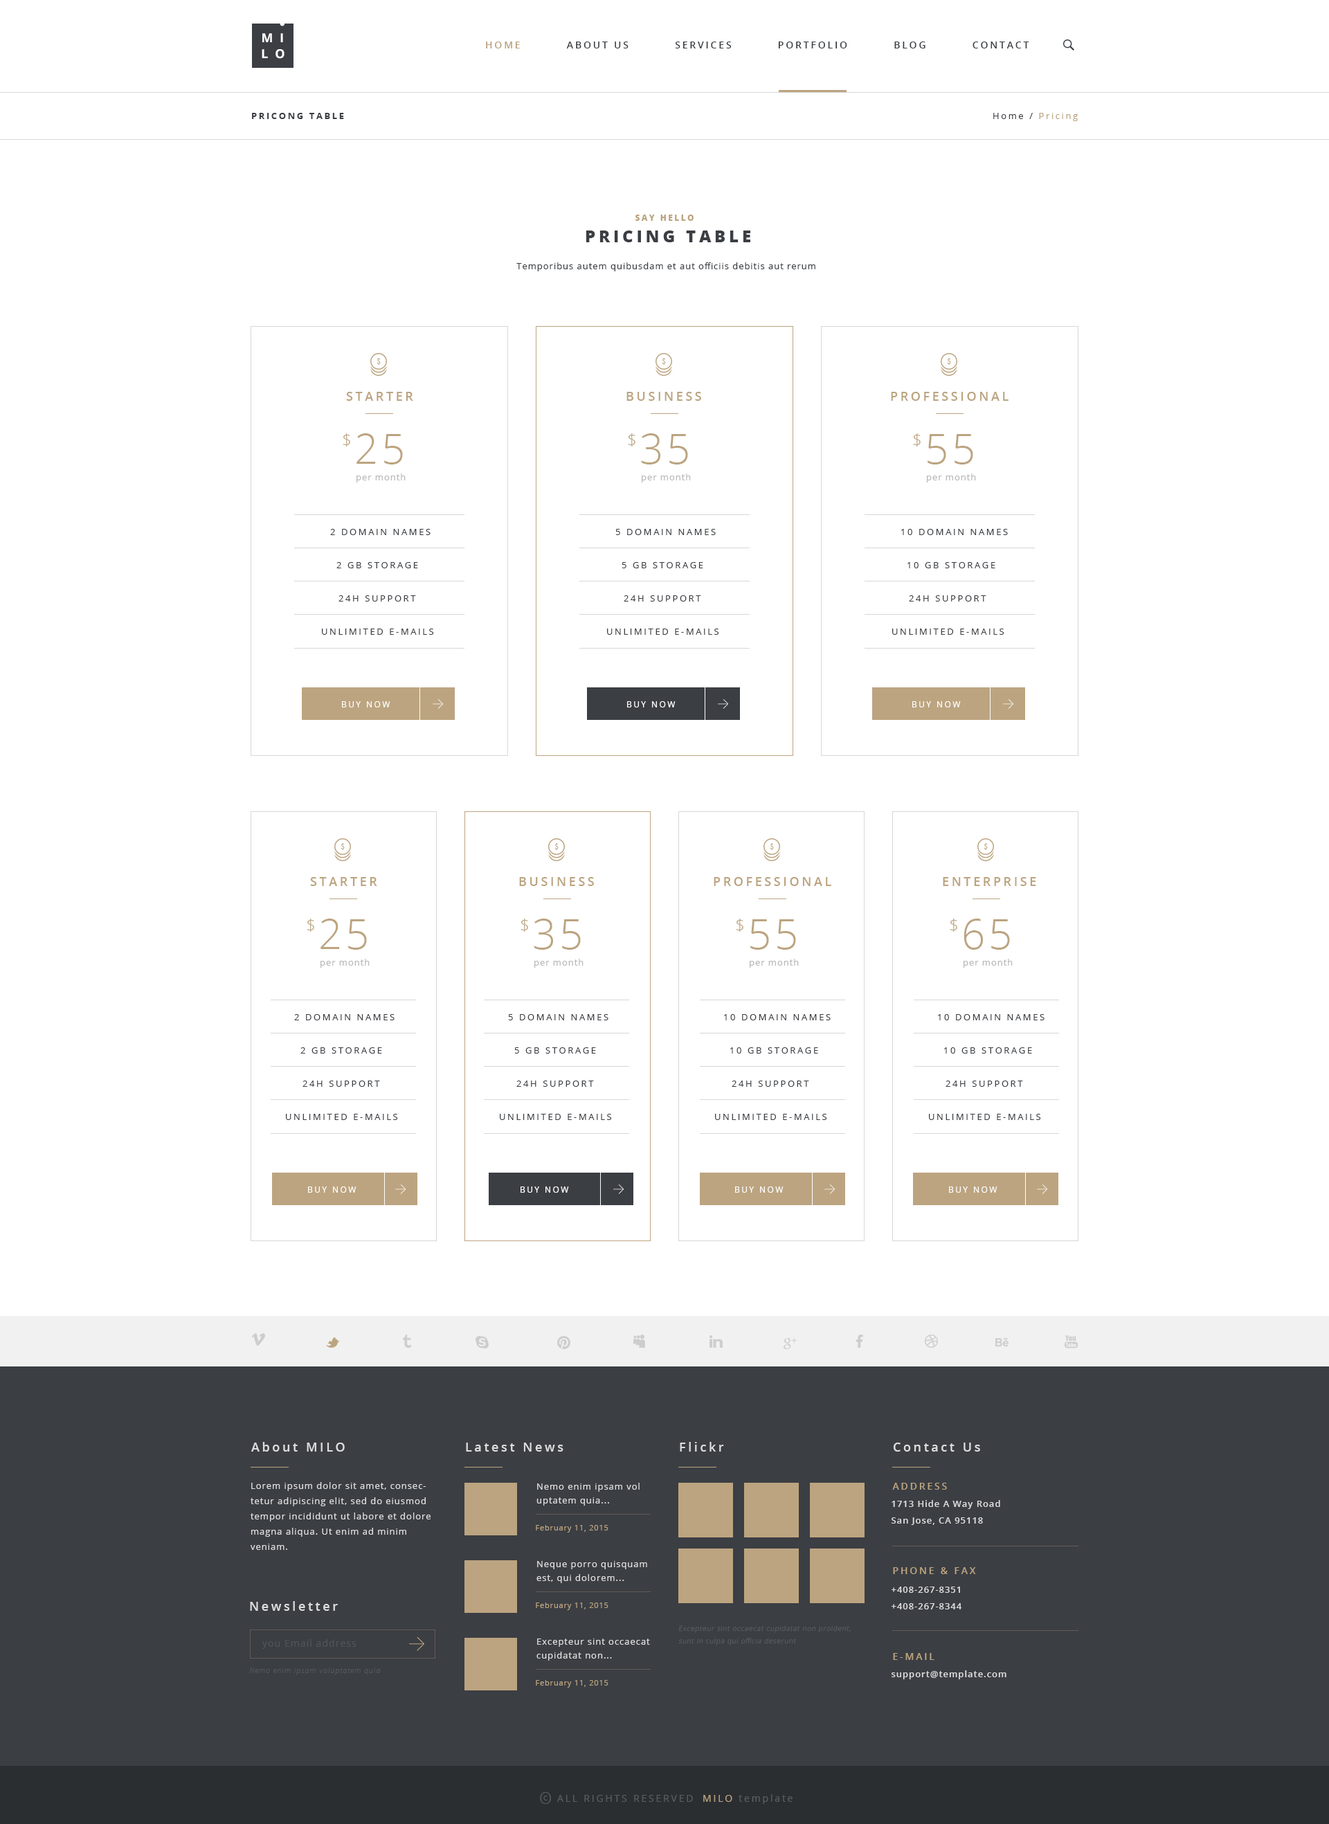
<style>
.page{position:relative;width:1329px;height:1824px;background:#ffffff}
.page>*{position:absolute;margin:0}
.t1{font:12.5px "OpenSans-Bold";letter-spacing:0.55em;color:#ffffff;text-transform:uppercase}
.t2{font:9.7px "OpenSans-Semibold";letter-spacing:0.2em;color:#3b3e43;text-transform:uppercase}
.t3{font:9.7px "OpenSans-Semibold";letter-spacing:0.2em;color:#bca480;text-transform:uppercase}
.t4{font:9px "OpenSans-Bold";letter-spacing:0.2em;color:#3b3e43;text-transform:uppercase}
.t5{font:9px "OpenSans";letter-spacing:0.2em;color:#bca480}
.t6{font:9px "OpenSans";letter-spacing:0.2em;color:#3b3e43}
.t7{font:8.3px "OpenSans-Extrabold";letter-spacing:0.2em;color:#bca480;text-transform:uppercase}
.t8{font:16.6px "OpenSans-Extrabold";letter-spacing:0.2em;color:#3b3e43;text-transform:uppercase}
.t9{font:9px "OpenSans";letter-spacing:0.075em;color:#3b3e43}
.t10{font:12.5px "OpenSans-Semibold";letter-spacing:0.2em;color:#bca480;text-transform:uppercase}
.t11{font:16.6px "OpenSans-Light";letter-spacing:0.075em;color:#bca480}
.t12{font:41.5px "OpenSans-Light";letter-spacing:0.075em;color:#bca480}
.t13{font:9px "OpenSans";letter-spacing:0.075em;color:#b8b8b8}
.t14{font:9px "OpenSans";letter-spacing:0.2em;color:#3b3e43;text-transform:uppercase}
.t15{font:8.3px "OpenSans";letter-spacing:0.2em;color:#ffffff;text-transform:uppercase}
.t16{font:12.5px "OpenSans-Semibold";letter-spacing:0.2em;color:#dddddd}
.t17{font:9px/15.2px "OpenSans";letter-spacing:0.075em;color:#dddddd}
.t18{font:9px/13.8px "OpenSans";letter-spacing:0.075em;color:#dddddd}
.t19{font:9px/16.6px "OpenSans-Semibold";letter-spacing:0.075em;color:#dddddd}
.t20{font:7.6px "OpenSans";letter-spacing:0.075em;color:#bca480}
.t21{font:6.9px/12.5px "OpenSans-Light";letter-spacing:0.075em;color:#585c62;font-style:italic}
.t22{font:9.7px "OpenSans";letter-spacing:0.075em;color:#505459}
.t23{font:7.6px "OpenSansLight-Italic";letter-spacing:0.075em;color:#53575d}
.t24{font:9px "OpenSans-Semibold";letter-spacing:0.075em;color:#dddddd}
.t25{font:16.6px "OpenSans-Light";letter-spacing:0.2em;color:#585c62;text-transform:uppercase}
.t26{font:6.9px "OpenSans";letter-spacing:0.2em;color:#585c62;text-transform:uppercase}
.t27{font:9.7px "OpenSans";letter-spacing:0.2em;color:#585c62;text-transform:uppercase}
.t28{font:9.7px "OpenSans";letter-spacing:0.2em;color:#585c62}
.t29{font:9.7px "OpenSans";letter-spacing:0.2em;color:#bca480;text-transform:uppercase}
</style>
<div class="page">
<p class="t1" style="left:262px;top:33px;width:21px;height:9px">mi</p>
<p class="t2" style="left:486px;top:42px;width:543px;height:6px"><span class="t3">Home          </span>About Us          Services          Portfolio          Blog          Contact</p>
<p class="t1" style="left:262px;top:49px;width:23px;height:10px">lo</p>
<p class="t4" style="left:252px;top:113px;width:92px;height:6px">Pricong table</p>
<p class="t5" style="left:993px;top:113px;width:85px;height:8px"><span class="t6">Home / </span>Pricing</p>
<p class="t7" style="left:636px;top:215px;width:58px;height:6px">say hello</p>
<p class="t8" style="left:586px;top:231px;width:164px;height:11px">Pricing TAble</p>
<p class="t9" style="left:516px;top:262px;width:300px;height:9px">Temporibus autem quibusdam et aut officiis debitis aut rerum</p>
<p class="t10" style="left:346px;top:392px;width:67px;height:9px">starter</p>
<p class="t10" style="left:627px;top:392px;width:74px;height:9px">business</p>
<p class="t10" style="left:891px;top:392px;width:118px;height:9px">professional</p>
<p class="t11" style="left:343px;top:433px;width:7px;height:14px">$</p>
<p class="t12" style="left:357px;top:433px;width:46px;height:32px">25</p>
<p class="t11" style="left:628px;top:433px;width:8px;height:14px">$</p>
<p class="t12" style="left:641px;top:433px;width:47px;height:32px">35</p>
<p class="t11" style="left:913px;top:433px;width:8px;height:14px">$</p>
<p class="t12" style="left:928px;top:434px;width:45px;height:31px">55</p>
<p class="t13" style="left:357px;top:474px;width:49px;height:9px">per month</p>
<p class="t13" style="left:642px;top:474px;width:49px;height:9px">per month</p>
<p class="t13" style="left:927px;top:474px;width:49px;height:9px">per month</p>
<p class="t14" style="left:330px;top:529px;width:101px;height:6px">2 domain names</p>
<p class="t14" style="left:615px;top:529px;width:101px;height:6px">5 domain names</p>
<p class="t14" style="left:901px;top:529px;width:107px;height:6px">10 domain names</p>
<p class="t14" style="left:336px;top:562px;width:82px;height:6px">2 gb storage</p>
<p class="t14" style="left:622px;top:562px;width:81px;height:6px">5 gb storage</p>
<p class="t14" style="left:908px;top:562px;width:88px;height:6px">10 gb storage</p>
<p class="t14" style="left:339px;top:595px;width:77px;height:7px">24h Support</p>
<p class="t14" style="left:624px;top:595px;width:77px;height:7px">24h Support</p>
<p class="t14" style="left:909px;top:595px;width:78px;height:7px">24h Support</p>
<p class="t14" style="left:322px;top:629px;width:112px;height:6px">unlimited e-mails</p>
<p class="t14" style="left:607px;top:629px;width:112px;height:6px">unlimited e-mails</p>
<p class="t14" style="left:892px;top:629px;width:113px;height:6px">unlimited e-mails</p>
<p class="t15" style="left:342px;top:701px;width:48px;height:7px">buy now</p>
<p class="t15" style="left:627px;top:701px;width:49px;height:7px">buy now</p>
<p class="t15" style="left:912px;top:701px;width:49px;height:7px">buy now</p>
<p class="t10" style="left:310px;top:877px;width:67px;height:9px">starter</p>
<p class="t10" style="left:519px;top:877px;width:75px;height:9px">business</p>
<p class="t10" style="left:714px;top:877px;width:117px;height:9px">professional</p>
<p class="t10" style="left:943px;top:877px;width:93px;height:9px">enterprise</p>
<p class="t11" style="left:307px;top:919px;width:7px;height:13px">$</p>
<p class="t12" style="left:321px;top:919px;width:46px;height:31px">25</p>
<p class="t11" style="left:521px;top:919px;width:7px;height:13px">$</p>
<p class="t12" style="left:534px;top:919px;width:47px;height:31px">35</p>
<p class="t11" style="left:736px;top:919px;width:8px;height:13px">$</p>
<p class="t12" style="left:750px;top:919px;width:46px;height:31px">55</p>
<p class="t11" style="left:950px;top:919px;width:7px;height:13px">$</p>
<p class="t12" style="left:964px;top:919px;width:46px;height:31px">65</p>
<p class="t13" style="left:321px;top:959px;width:49px;height:9px">per month</p>
<p class="t13" style="left:534px;top:959px;width:50px;height:9px">per month</p>
<p class="t13" style="left:750px;top:959px;width:49px;height:9px">per month</p>
<p class="t13" style="left:964px;top:959px;width:49px;height:9px">per month</p>
<p class="t14" style="left:294px;top:1014px;width:101px;height:6px">2 domain names</p>
<p class="t14" style="left:508px;top:1014px;width:101px;height:6px">5 domain names</p>
<p class="t14" style="left:724px;top:1014px;width:107px;height:6px">10 domain names</p>
<p class="t14" style="left:938px;top:1014px;width:107px;height:6px">10 domain names</p>
<p class="t14" style="left:300px;top:1047px;width:82px;height:7px">2 gb storage</p>
<p class="t14" style="left:514px;top:1047px;width:82px;height:7px">5 gb storage</p>
<p class="t14" style="left:730px;top:1047px;width:88px;height:7px">10 gb storage</p>
<p class="t14" style="left:944px;top:1047px;width:88px;height:7px">10 gb storage</p>
<p class="t14" style="left:303px;top:1081px;width:77px;height:6px">24h Support</p>
<p class="t14" style="left:516px;top:1081px;width:78px;height:6px">24h Support</p>
<p class="t14" style="left:732px;top:1081px;width:77px;height:6px">24h Support</p>
<p class="t14" style="left:946px;top:1081px;width:77px;height:6px">24h Support</p>
<p class="t14" style="left:286px;top:1114px;width:112px;height:6px">unlimited e-mails</p>
<p class="t14" style="left:500px;top:1114px;width:112px;height:6px">unlimited e-mails</p>
<p class="t14" style="left:715px;top:1114px;width:112px;height:6px">unlimited e-mails</p>
<p class="t14" style="left:929px;top:1114px;width:112px;height:6px">unlimited e-mails</p>
<p class="t15" style="left:308px;top:1187px;width:49px;height:6px">buy now</p>
<p class="t15" style="left:521px;top:1187px;width:48px;height:6px">buy now</p>
<p class="t15" style="left:735px;top:1187px;width:49px;height:6px">buy now</p>
<p class="t15" style="left:949px;top:1187px;width:49px;height:6px">buy now</p>
<p class="t16" style="left:251px;top:1442px;width:94px;height:10px">About MILO</p>
<p class="t16" style="left:466px;top:1443px;width:98px;height:9px">Latest News</p>
<p class="t16" style="left:680px;top:1442px;width:44px;height:10px">Flickr</p>
<p class="t16" style="left:893px;top:1443px;width:87px;height:9px">Contact Us</p>
<p class="t17" style="left:251px;top:1482px;width:180px;height:68px">Lorem ipsum dolor sit amet, consectetur adipiscing elit, sed do eiusmod tempor incididunt ut labore et dolore magna aliqua. Ut enim ad minim veniam.</p>
<p class="t18" style="left:537px;top:1483px;width:103px;height:23px">Nemo enim ipsam vol uptatem quia...</p>
<p class="t3" style="left:892px;top:1483px;width:55px;height:7px">Address</p>
<p class="t19" style="left:892px;top:1500px;width:108px;height:25px">1713 Hide A Way Road<br>San Jose, CA 95118</p>
<p class="t20" style="left:536px;top:1525px;width:73px;height:8px">February 11, 2015</p>
<p class="t18" style="left:537px;top:1561px;width:110px;height:22px">Neque porro quisquam est, qui dolorem...</p>
<p class="t3" style="left:893px;top:1567px;width:83px;height:7px">Phone &amp; Fax</p>
<p class="t19" style="left:892px;top:1587px;width:70px;height:23px">+408-267-8351<br>+408-267-8344</p>
<p class="t16" style="left:250px;top:1601px;width:88px;height:10px">Newsletter</p>
<p class="t20" style="left:536px;top:1603px;width:73px;height:7px">February 11, 2015</p>
<p class="t21" style="left:678px;top:1626px;width:173px;height:20px">Excepteur sint occaecat cupidatat non proident, sunt in culpa qui officia deserunt</p>
<p class="t22" style="left:262px;top:1639px;width:95px;height:10px">you Email address</p>
<p class="t18" style="left:537px;top:1639px;width:113px;height:22px">Excepteur sint occaecat cupidatat non...</p>
<p class="t3" style="left:893px;top:1653px;width:42px;height:7px">E-mail</p>
<p class="t23" style="left:249px;top:1668px;width:132px;height:7px">Nemo enim ipsam voluptatem quia</p>
<p class="t24" style="left:892px;top:1671px;width:115px;height:9px">support@template.com</p>
<p class="t20" style="left:536px;top:1680px;width:73px;height:8px">February 11, 2015</p>
<p class="t25" style="left:540px;top:1792px;width:11px;height:12px">O</p>
<p class="t26" style="left:543px;top:1796px;width:5px;height:5px">c</p>
<p class="t27" style="left:557px;top:1795px;width:136px;height:7px">All Rights Reserved</p>
<p class="t28" style="left:703px;top:1794px;width:90px;height:10px"><span class="t29">MILO </span>template</p>
</div>
